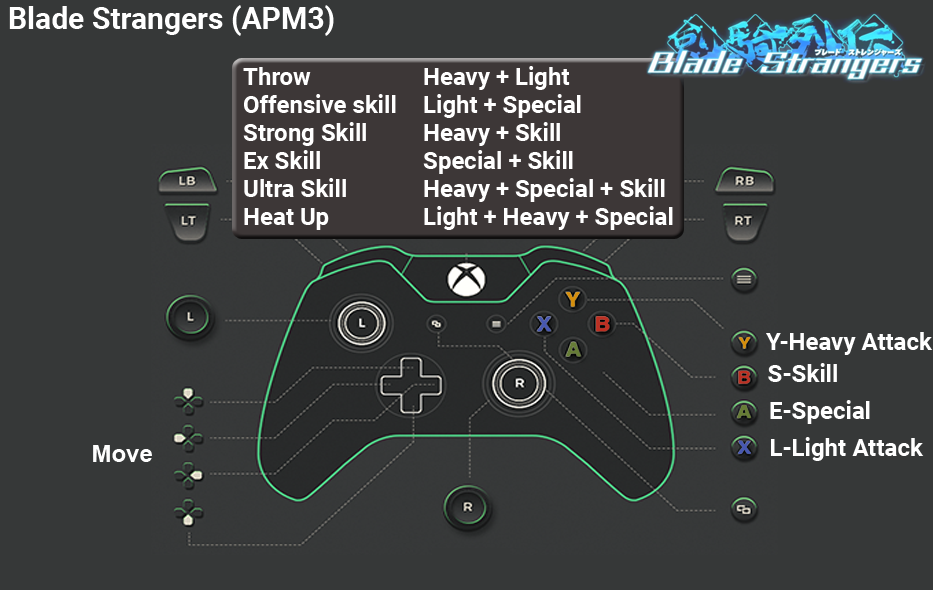
<style>
.page{position:relative;width:933px;height:590px;background:#363838}
.page>*{position:absolute;margin:0}
.t1{font:30px "Roboto-Bold";color:#ffffff}
.t2{font:24px/28px "Roboto-Bold";color:#ffffff}
.t3{font:24px "Roboto-Bold";color:#ffffff}
.t4{font:24px "Arial-BoldMT";color:#fefefe}
</style>
<div class="page">
<p class="t1" style="left:9px;top:5px;width:325px;height:31px">Blade Strangers (APM3)</p>
<p class="t2" style="left:243px;top:66px;width:430px;height:164px">Throw    Heavy + Light<br>Offensive skill Light + Special<br>Strong Skill  Heavy + Skill<br>Ex Skill   Special + Skill<br>Ultra Skill   Heavy + Special + Skill<br>Heat Up   Light + Heavy + Special</p>
<p class="t3" style="left:766px;top:332px;width:167px;height:23px">Y-Heavy Attack</p>
<p class="t3" style="left:768px;top:363px;width:69px;height:19px">S-Skill</p>
<p class="t3" style="left:770px;top:400px;width:100px;height:24px">E-Special</p>
<p class="t3" style="left:771px;top:437px;width:153px;height:24px">L-Light Attack</p>
<p class="t4" style="left:93px;top:445px;width:59px;height:17px">Move</p>
</div>
